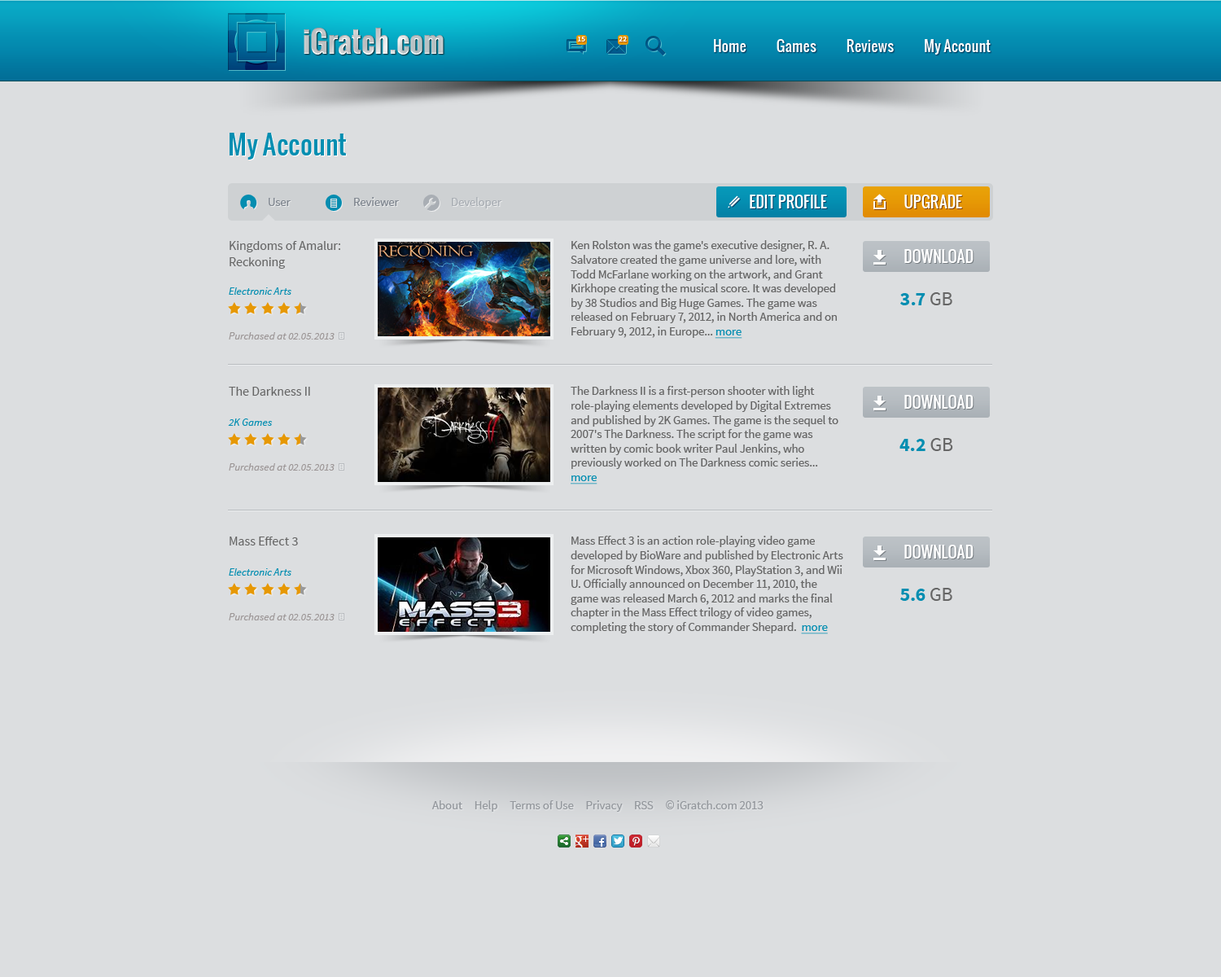
<style>
.page{position:relative;width:1221px;height:977px;background:#dcdee0}
.page>*{position:absolute;margin:0}
.t1{font:29.3px "Oswald-Bold";color:#c2c6c8}
.t2{font:7.6px "SourceSansPro-Bold";color:#ffffff}
.t3{font:14.7px "Oswald";color:#fffefe}
.t4{font:26px "Oswald";color:#048eb1}
.t5{font:11.9px "SourceSansPro-Regular";color:#7f868f}
.t6{font:11.9px "SourceSansPro-Regular";color:#aaafb5}
.t7{font:15.2px "Oswald";color:#ffffff}
.t8{font:13px "SourceSansPro-Regular";color:#666666}
.t9{font:11.9px "SourceSansPro-Regular";color:#666666}
.t10{font:11.9px "SourceSansPro-Regular";color:#048eb1;text-decoration:underline}
.t11{font:10.9px "SourceSansPro-It";color:#048eb1}
.t12{font:19.5px "SourceSansPro-Bold";color:#048eb1}
.t13{font:19.5px "SourceSansPro-Regular";color:#666666}
.t14{font:10.9px "SourceSansPro-It";color:#9d9797}
.t15{font:11.9px "SourceSansPro-Regular";color:#94989d}
</style>
<div class="page">
<p class="t1" style="left:304px;top:28px;width:140px;height:27px">iGratch.com</p>
<p class="t2" style="left:577px;top:37px;width:8px;height:5px">15</p>
<p class="t2" style="left:619px;top:37px;width:8px;height:5px">22</p>
<p class="t3" style="left:714px;top:39px;width:277px;height:16px">Home            Games            Reviews            My Account</p>
<p class="t4" style="left:230px;top:133px;width:116px;height:27px">My Account</p>
<p class="t5" style="left:269px;top:198px;width:22px;height:8px">User</p>
<p class="t5" style="left:354px;top:197px;width:45px;height:9px">Reviewer</p>
<p class="t6" style="left:452px;top:197px;width:50px;height:11px">Developer</p>
<p class="t7" style="left:750px;top:195px;width:77px;height:13px">EDIT PROFILE</p>
<p class="t7" style="left:904px;top:195px;width:58px;height:13px">UPGRADE</p>
<p class="t8" style="left:230px;top:241px;width:110px;height:28px">Kingdoms of Amalur: Reckoning</p>
<p class="t9" style="left:571px;top:240px;width:266px;height:99px">Ken Rolston was the game's executive designer, R. A. Salvatore created the game universe and lore, with Todd McFarlane working on the artwork, and Grant Kirkhope creating the musical score. It was developed by 38 Studios and Big Huge Games. The game was released on February 7, 2012, in North America and on February 9, 2012, in Europe... <span class="t10">more</span></p>
<p class="t7" style="left:904px;top:249px;width:69px;height:14px">DOWNLOAD</p>
<p class="t11" style="left:229px;top:287px;width:62px;height:8px">Electronic Arts</p>
<p class="t12" style="left:900px;top:292px;width:52px;height:13px">3.7<span class="t13"> GB</span></p>
<p class="t14" style="left:229px;top:332px;width:106px;height:7px">Purchased at 02.05.2013</p>
<p class="t8" style="left:229px;top:387px;width:81px;height:9px">The Darkness II</p>
<p class="t9" style="left:571px;top:386px;width:267px;height:98px">The Darkness II is a first-person shooter with light role-playing elements developed by Digital Extremes and published by 2K Games. The game is the sequel to 2007's The Darkness. The script for the game was written by comic book writer Paul Jenkins, who previously worked on The Darkness comic series... <span class="t10">more</span></p>
<p class="t7" style="left:904px;top:395px;width:69px;height:14px">DOWNLOAD</p>
<p class="t11" style="left:228px;top:418px;width:45px;height:8px">2K Games</p>
<p class="t12" style="left:899px;top:438px;width:54px;height:13px">4.2<span class="t13"> GB</span></p>
<p class="t14" style="left:229px;top:463px;width:106px;height:7px">Purchased at 02.05.2013</p>
<p class="t8" style="left:230px;top:536px;width:68px;height:9px">Mass Effect 3</p>
<p class="t9" style="left:571px;top:536px;width:272px;height:98px">Mass Effect 3 is an action role-playing video game developed by BioWare and published by Electronic Arts for Microsoft Windows, Xbox 360, PlayStation 3, and Wii U. Officially announced on December 11, 2010, the game was released March 6, 2012 and marks the final chapter in the Mass Effect trilogy of video games, completing the story of Commander Shepard.  <span class="t10">more</span></p>
<p class="t7" style="left:904px;top:545px;width:69px;height:13px">DOWNLOAD</p>
<p class="t11" style="left:229px;top:568px;width:62px;height:7px">Electronic Arts</p>
<p class="t12" style="left:900px;top:588px;width:52px;height:13px">5.6<span class="t13"> GB</span></p>
<p class="t14" style="left:229px;top:613px;width:106px;height:7px">Purchased at 02.05.2013</p>
<p class="t15" style="left:431px;top:800px;width:332px;height:11px">About     Help     Terms of Use     Privacy     RSS     © iGratch.com 2013</p>
</div>
